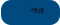
<style>
.page{position:relative;width:60px;height:25px;background:#004a80}
.page>*{position:absolute;margin:0}
.t1{font:8.3px "Tahoma";color:#101212}
</style>
<div class="page">
<p class="t1" style="left:30px;top:7px;width:14px;height:6px">ورود</p>
</div>
